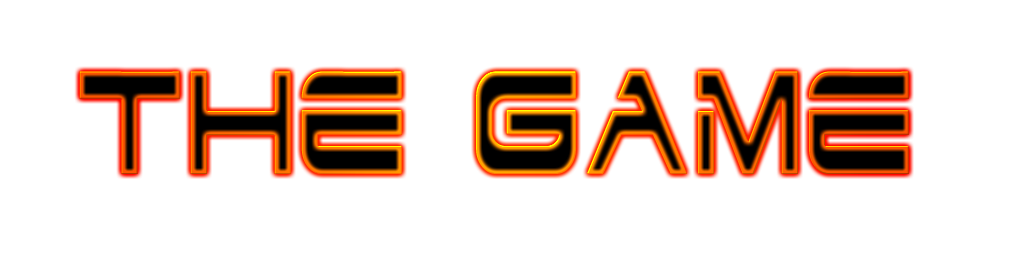
<style>
.page{position:relative;width:1024px;height:256px;background:#ffffff}
.page>*{position:absolute;margin:0}
.t1{font:175.6px "Dodger";scale:0.6 1}
</style>
<div class="page">
<p class="t1" style="left:79px;top:71px;width:830px;height:103px">THE GAME</p>
<p class="t1" style="left:79px;top:71px;width:830px;height:103px">THE GAME</p>
</div>
